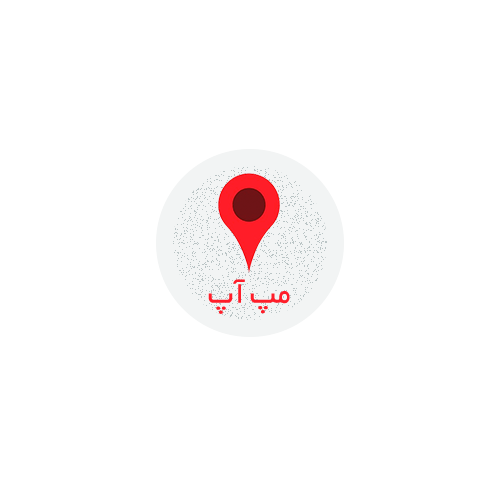
<style>
.page{position:relative;width:500px;height:500px;background:#ffffff}
.page>*{position:absolute;margin:0}
.t1{font:33.3px "BYekan+";color:#ff1d29}
</style>
<div class="page">
<p class="t1" style="left:208px;top:279px;width:82px;height:35px">مپ آپ</p>
</div>
